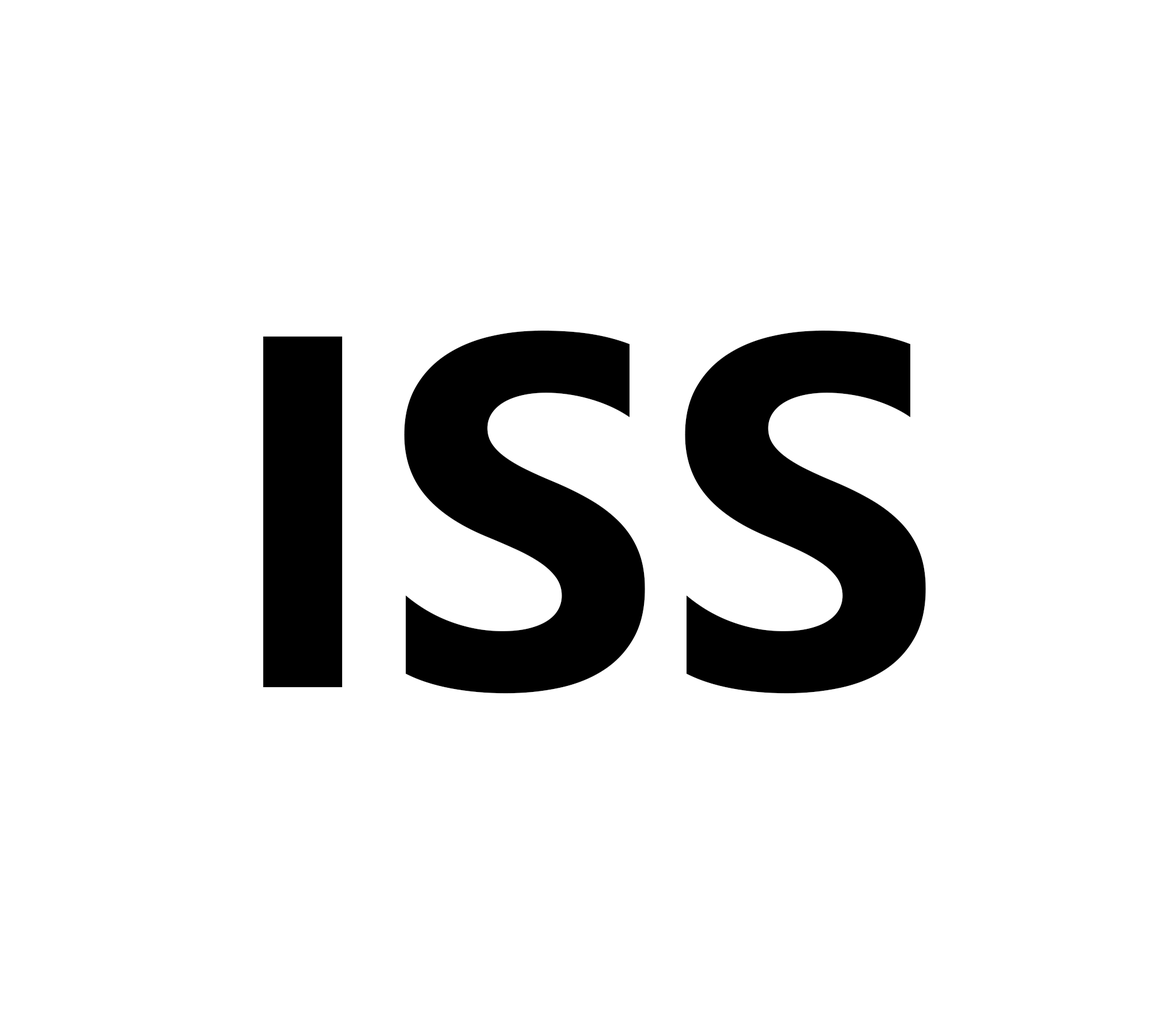
<style>
.page{position:relative;width:1167px;height:1022px;background:#ffffff}
.page>*{position:absolute;margin:0}
.t1{font:501px "SegoeUI-Bold";color:#000000}
</style>
<div class="page">
<p class="t1" style="left:263px;top:330px;width:663px;height:364px">ISS</p>
</div>
